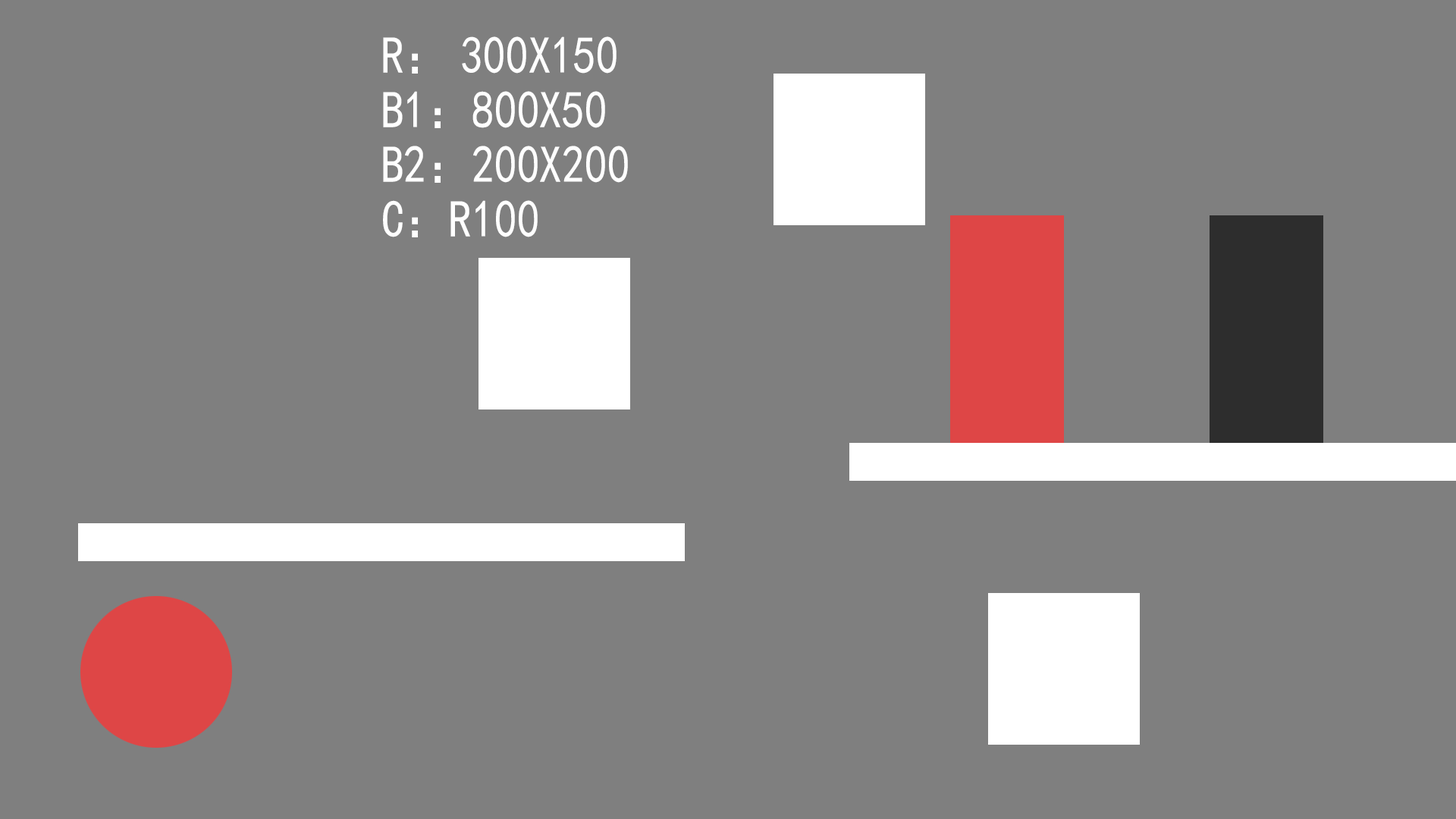
<style>
.page{position:relative;width:1456px;height:819px;background:#7f7f7f}
.page>*{position:absolute;margin:0}
.t1{font:52.5px/54.6px "SimHei";color:#ffffff;scale:0.86 1}
</style>
<div class="page">
<p class="t1" style="left:383px;top:36px;width:245px;height:201px">R： 300X150<br>B1：800X50<br>B2：200X200<br>C：R100</p>
</div>
